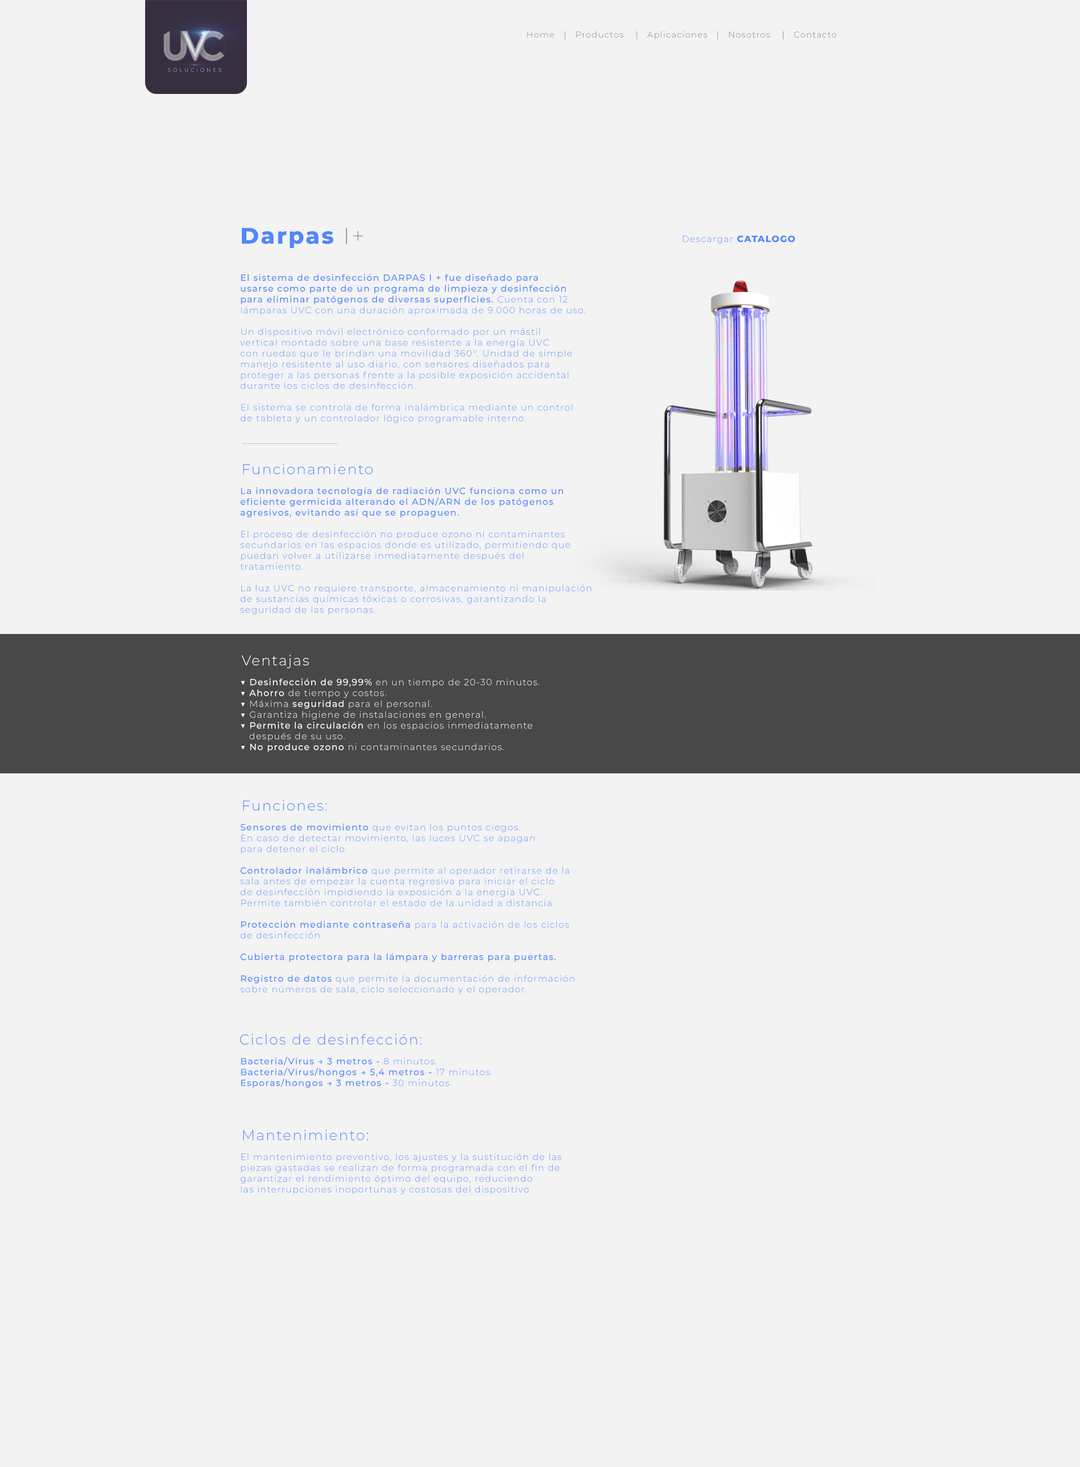
<style>
.page{position:relative;width:1080px;height:1467px;background:#f3f3f3}
.page>*{position:absolute;margin:0}
.t1{font:8.4px "Montserrat-Light";letter-spacing:0.08em;color:#7f7b7b}
.t2{font:22.5px "Montserrat-ExtraBold";letter-spacing:0.08em;color:#4f87fd}
.t3{font:22.5px "Montserrat-Light";letter-spacing:0.08em;color:#9c9c9d}
.t4{font:9px "Montserrat-Light";letter-spacing:0.08em;color:#4f87fd}
.t5{font:9px "Montserrat-ExtraBold";letter-spacing:0.08em;color:#4f87fd}
.t6{font:9px "Montserrat-Medium";letter-spacing:0.08em;color:#4f87fd}
.t7{font:14.2px "Montserrat-Light";letter-spacing:0.08em;color:#4f87fd}
.t8{font:14.2px "Montserrat-Light";letter-spacing:0.08em;color:#ffffff}
.t9{font:9px "Montserrat-Light";letter-spacing:0.08em;color:#ffffff}
.t10{font:9px "Montserrat-Medium";letter-spacing:0.08em;color:#ffffff}
</style>
<div class="page">
<p class="t1" style="left:527px;top:31px;width:309px;height:8px">Home   |   Productos    |   Aplicaciones   |   Nosotros    |   Contacto</p>
<p class="t2" style="left:242px;top:228px;width:121px;height:20px">Darpas <span class="t3">I+</span></p>
<p class="t4" style="left:683px;top:235px;width:112px;height:9px">Descargar <span class="t5">CATALOGO</span></p>
<p class="t4" style="left:240px;top:274px;width:346px;height:149px"><span class="t6">El sistema de desinfección DARPAS I + fue diseñado para <br>usarse como parte de un programa de limpieza y desinfección <br>para eliminar patógenos de diversas superficies.</span> Cuenta con 12 <br>lámparas UVC con una duración aproximada de 9.000 horas de uso.<br><br>Un dispositivo móvil electrónico conformado por un mástil <br>vertical montado sobre una base resistente a la energía UVC <br>con ruedas que le brindan una movilidad 360°. Unidad de simple <br>manejo resistente al uso diario, con sensores diseñados para <br>proteger a las personas frente a la posible exposición accidental <br>durante los ciclos de desinfección.<br><br>El sistema se controla de forma inalámbrica mediante un control <br>de tableta y un controlador lógico programable interno.</p>
<p class="t7" style="left:243px;top:464px;width:130px;height:10px">Funcionamiento</p>
<p class="t4" style="left:240px;top:487px;width:351px;height:128px"><span class="t6">La innovadora tecnología de radiación UVC funciona como un <br>eficiente germicida alterando el ADN/ARN de los patógenos <br>agresivos, evitando así que se propaguen.<br></span><br>El proceso de desinfección no produce ozono ni contaminantes <br>secundarios en las espacios donde es utilizado, permitiendo que <br>puedan volver a utilizarse inmediatamente después del <br>tratamiento.<br><br>La luz UVC no requiere transporte, almacenamiento ni manipulación <br>de sustancias químicas tóxicas o corrosivas, garantizando la <br>seguridad de las personas.</p>
<p class="t8" style="left:241px;top:655px;width:68px;height:13px">Ventajas</p>
<p class="t9" style="left:241px;top:678px;width:298px;height:74px">▼ <span class="t10">Desinfección de 99,99%</span> en un tiempo de 20-30 minutos.<br>▼ <span class="t10">Ahorro </span>de tiempo y costos.<br>▼ Máxima <span class="t10">seguridad </span>para el personal.<br>▼ Garantiza higiene de instalaciones en general.<br>▼ <span class="t10">Permite la circulación</span> en los espacios inmediatamente <br>   después de su uso.<br>▼ <span class="t10">No produce ozono</span> ni contaminantes secundarios.</p>
<p class="t7" style="left:243px;top:800px;width:84px;height:11px">Funciones:</p>
<p class="t4" style="left:240px;top:824px;width:334px;height:171px"><span class="t6">Sensores de movimiento </span>que evitan los puntos ciegos. <br>En caso de detectar movimiento, las luces UVC se apagan <br>para detener el ciclo.<br><span class="t6"><br>Controlador inalámbrico </span>que permite al operador retirarse de la <br>sala antes de empezar la cuenta regresiva para iniciar el ciclo <br>de desinfección impidiendo la exposición a la energía UVC. <br>Permite también controlar el estado de la unidad a distancia.<br><span class="t6"><br>Protección mediante contraseña </span>para la activación de los ciclos <br>de desinfección.<br><span class="t6"><br>Cubierta protectora para la lámpara y barreras para puertas.<br><br>Registro de datos </span>que permite la documentación de información <br>sobre números de sala, ciclo seleccionado y el operador.</p>
<p class="t7" style="left:240px;top:1034px;width:182px;height:11px">Ciclos de desinfección:</p>
<p class="t6" style="left:241px;top:1056px;width:251px;height:32px">Bacteria/Virus → 3 metros - <span class="t4">8 minutos.<br></span>Bacteria/Virus/hongos → 5,4 metros - <span class="t4">17 minutos.<br></span>Esporas/hongos → 3 metros - <span class="t4">30 minutos.</span></p>
<p class="t7" style="left:243px;top:1130px;width:125px;height:10px">Mantenimiento:</p>
<p class="t4" style="left:240px;top:1153px;width:321px;height:41px">El mantenimiento preventivo, los ajustes y la sustitución de las <br>piezas gastadas se realizan de forma programada con el fin de <br>garantizar el rendimiento óptimo del equipo, reduciendo<br>las interrupciones inoportunas y costosas del dispositivo.</p>
</div>
